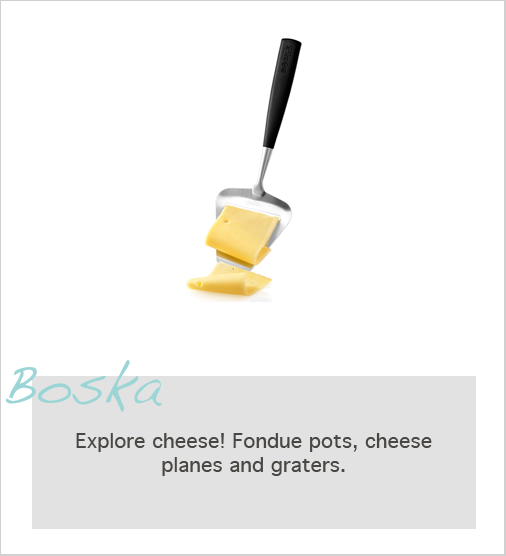
<style>
.page{position:relative;width:506px;height:556px;background:#ffffff}
.page>*{position:absolute;margin:0}
.t1{font:56px "Handwriting-Dakota";color:#9bd5d5}
.t2{font:20px "Geneva";color:#484743}
</style>
<div class="page">
<p class="t1" style="left:5px;top:360px;width:157px;height:52px">Boska</p>
<p class="t2" style="left:76px;top:433px;width:356px;height:43px;text-align:center">Explore cheese! Fondue pots, cheese planes and graters.</p>
</div>
